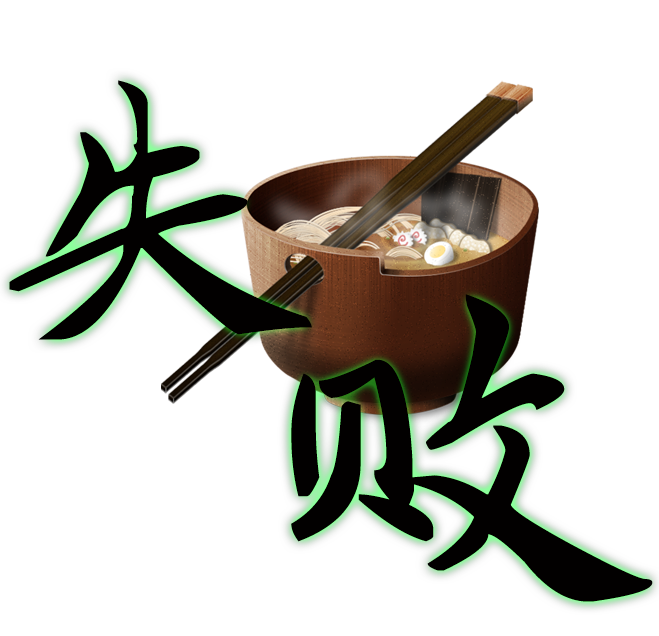
<style>
.page{position:relative;width:659px;height:636px;background:#ffffff}
.page>*{position:absolute;margin:0}
.t1{font:373.6px "SentyZHAO";color:#020000}
</style>
<div class="page">
<p class="t1" style="left:9px;top:80px;width:303px;height:260px">失</p>
<p class="t1" style="left:291px;top:294px;width:362px;height:308px">败</p>
</div>
